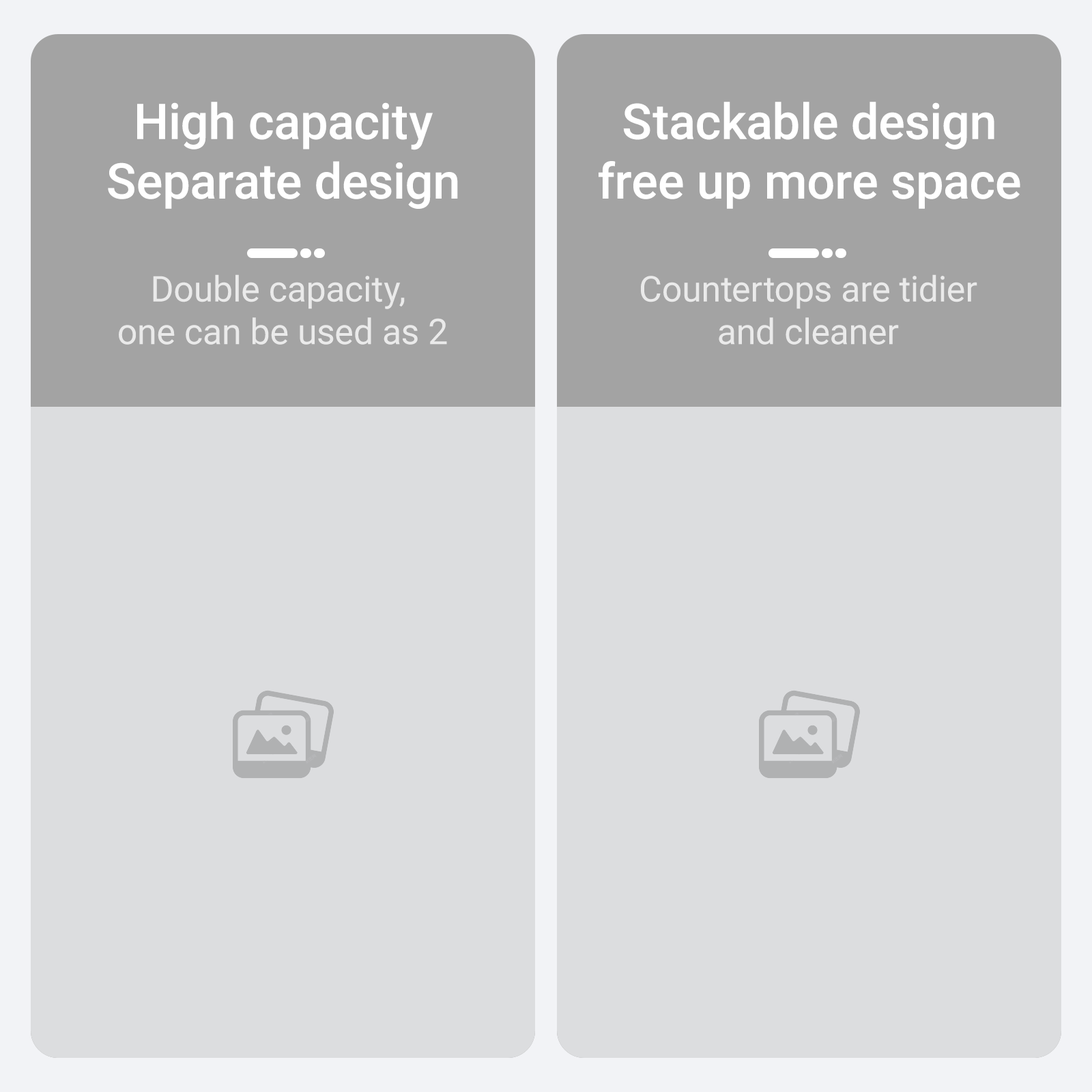
<style>
.page{position:relative;width:1092px;height:1092px;background:#dcdddf}
.page>*{position:absolute;margin:0}
.t1{font:49.5px "Roboto-Medium";color:#ffffff}
.t2{font:35.5px "Roboto-Regular";color:#ffffff}
</style>
<div class="page">
<p class="t1" style="left:108px;top:102px;width:350px;height:107px;text-align:center">High capacity<br>Separate design</p>
<p class="t1" style="left:599px;top:102px;width:421px;height:107px;text-align:center">Stackable design<br>free up more space</p>
<p class="t2" style="left:119px;top:274px;width:328px;height:71px;text-align:center;opacity:0.75">Double capacity, <br>one can be used as 2</p>
<p class="t2" style="left:641px;top:274px;width:336px;height:71px;text-align:center;opacity:0.75">Countertops are tidier<br>and cleaner</p>
</div>
